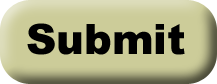
<style>
.page{position:relative;width:217px;height:84px;background:#cccc99}
.page>*{position:absolute;margin:0}
.t1{font:41.7px "Arial-Black";color:#000000}
</style>
<div class="page">
<p class="t1" style="left:27px;top:23px;width:158px;height:32px">Submit</p>
</div>
